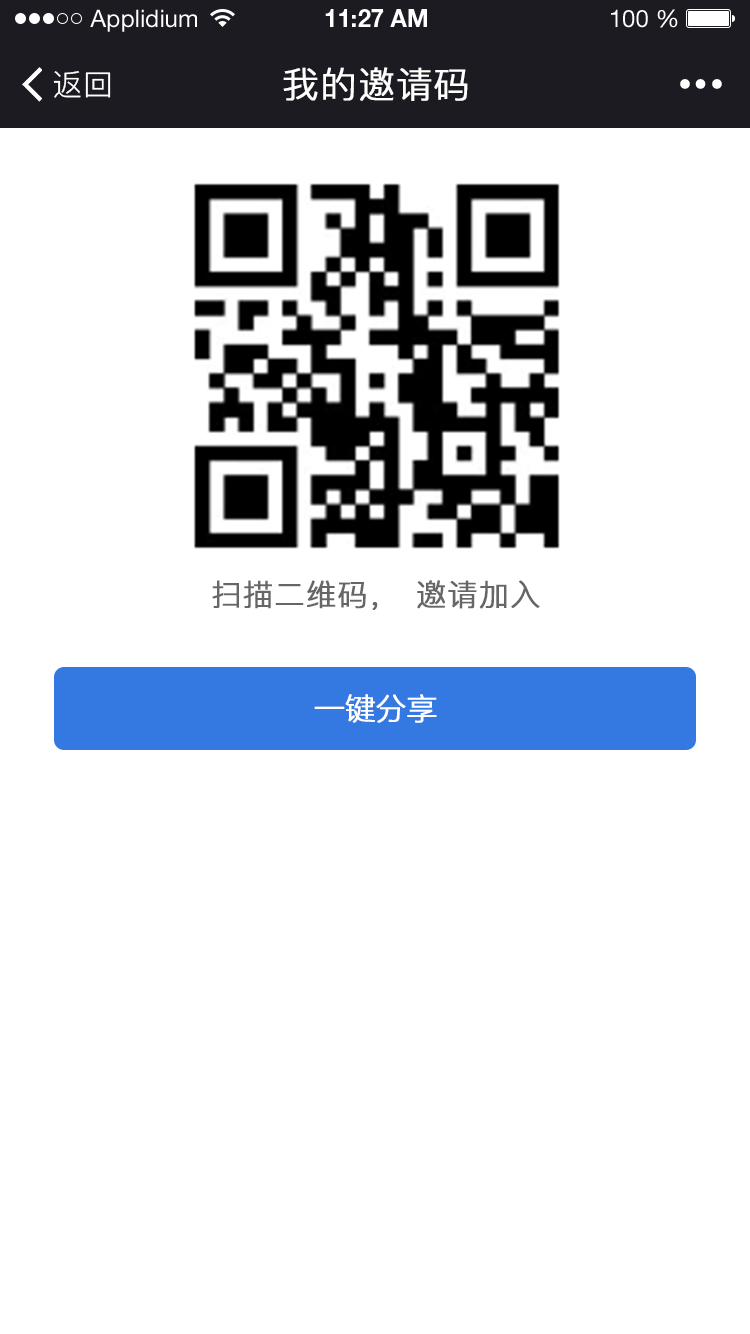
<style>
.page{position:relative;width:750px;height:1334px;background:#ffffff}
.page>*{position:absolute;margin:0}
.t1{font:24px "HelveticaNeueLTStd-Roman";color:#ffffff}
.t2{font:24px "HelveticaNeueLTStd-Bd";color:#ffffff}
.t3{font:30px "PingFang-SC-Regular";letter-spacing:0.025em;color:#ffffff}
.t4{font:36px "PingFang-SC-Regular";letter-spacing:0.025em;color:#ffffff;font-weight:bold}
.t5{font:30px "PingFang-SC-Regular";letter-spacing:0.025em;color:#666666;font-weight:bold}
.t6{font:30px "FZLTXHK--GBK1-0";color:#ffffff;font-weight:bold}
</style>
<div class="page">
<p class="t1" style="left:90px;top:9px;width:107px;height:23px">Applidium</p>
<p class="t2" style="left:325px;top:9px;width:102px;height:18px">11:27 AM</p>
<p class="t1" style="left:611px;top:9px;width:67px;height:19px">100 %</p>
<p class="t3" style="left:53px;top:71px;width:58px;height:27px">返回</p>
<p class="t4" style="left:283px;top:67px;width:185px;height:34px">我的邀请码</p>
<p class="t5" style="left:212px;top:580px;width:328px;height:30px">扫描二维码，邀请加入</p>
<p class="t6" style="left:314px;top:694px;width:123px;height:29px">一键分享</p>
</div>
